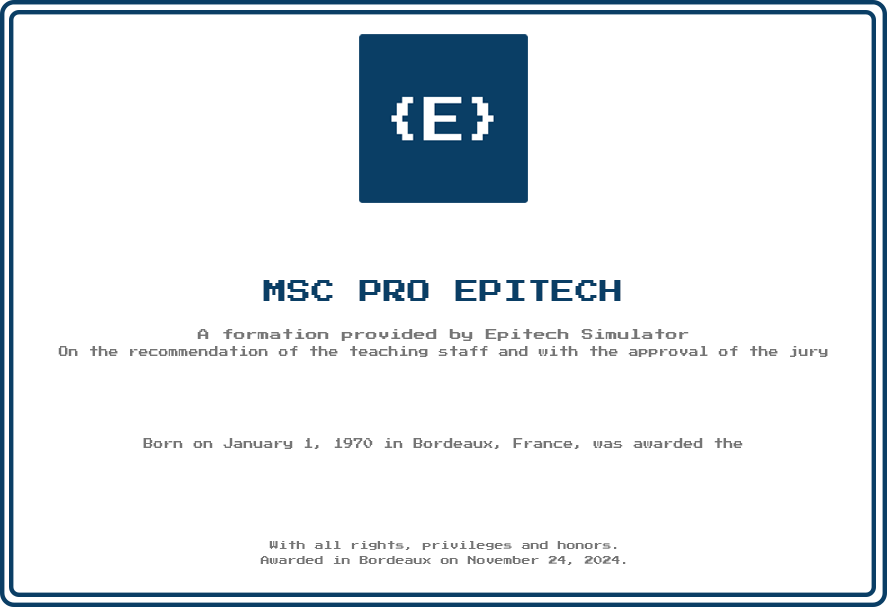
<style>
.page{position:relative;width:887px;height:607px;background:#ffffff}
.page>*{position:absolute;margin:0}
.t1{font:24px "PressStart2P-Regular";color:#0a3e65}
.t2{font:10px "PressStart2P-Regular";color:#757575}
.t3{font:12px "PressStart2P-Regular";color:#757575}
.t4{font:9px "PressStart2P-Regular";color:#757575}
</style>
<div class="page">
<p class="t1" style="left:263px;top:280px;width:358px;height:21px">MSC PRO EPITECH</p>
<p class="t2" style="left:58px;top:329px;width:770px;height:28px;text-align:center"><span class="t3">A formation provided by Epitech Simulator<br></span>On the recommendation of the teaching staff and with the approval of the jury</p>
<p class="t2" style="left:143px;top:438px;width:600px;height:11px">Born on January 1, 1970 in Bordeaux, France, was awarded the</p>
<p class="t4" style="left:260px;top:541px;width:366px;height:24px;text-align:center">With all rights, privileges and honors.<br>Awarded in Bordeaux on November 24, 2024.</p>
</div>
